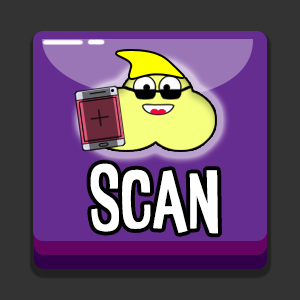
<style>
.page{position:relative;width:300px;height:300px;background:#333333}
.page>*{position:absolute;margin:0}
.t1{font:85.1px "InsideOut";color:#ffffff;scale:0.82 1}
</style>
<div class="page">
<p class="t1" style="left:90px;top:163px;width:128px;height:71px">Scan</p>
</div>
